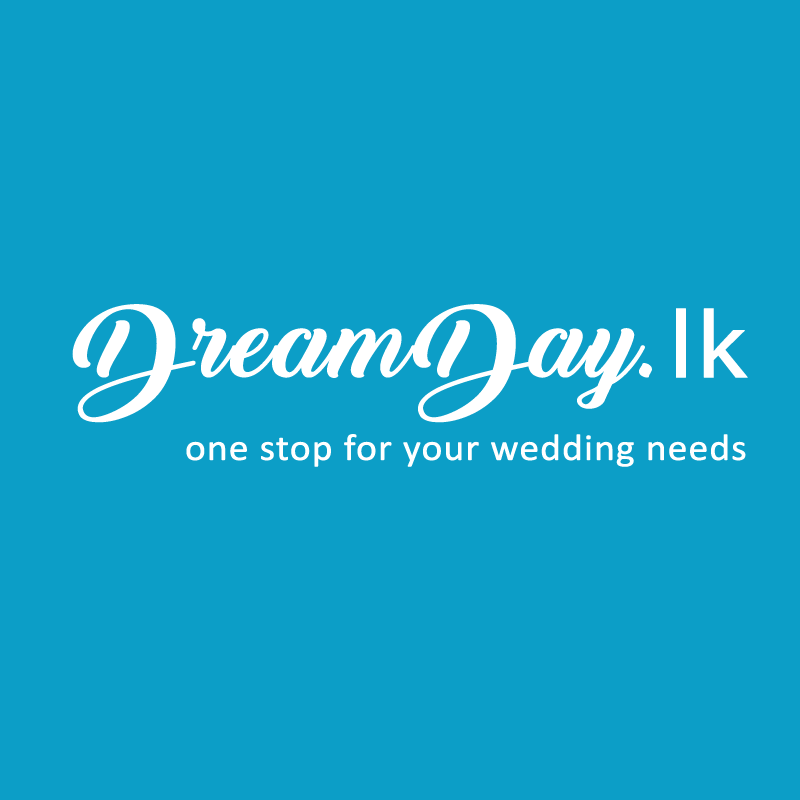
<style>
.page{position:relative;width:800px;height:800px;background:#0c9ec7}
.page>*{position:absolute;margin:0}
.t1{font:96.9px "BacktoBlackDemo";color:#ffffff;font-weight:bold;scale:1.1 1}
.t2{font:96.9px "MyriadPro-Regular";color:#ffffff;font-weight:bold;scale:1.1 1}
.t3{font:37.4px "Calibri";color:#ffffff;font-weight:bold;scale:1.06 1}
</style>
<div class="page">
<p class="t1" style="left:72px;top:304px;width:676px;height:119px">DreamDay.<span class="t2">lk</span></p>
<p class="t3" style="left:186px;top:434px;width:560px;height:33px">one stop for your wedding needs</p>
</div>
